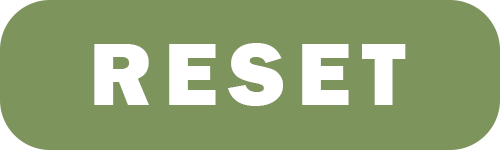
<style>
.page{position:relative;width:500px;height:150px;background:#7d945d}
.page>*{position:absolute;margin:0}
.t1{font:91.7px "FranklinGothic-Heavy";letter-spacing:0.13em;color:#ffffff}
</style>
<div class="page">
<p class="t1" style="left:94px;top:43px;width:312px;height:63px">RESET</p>
</div>
